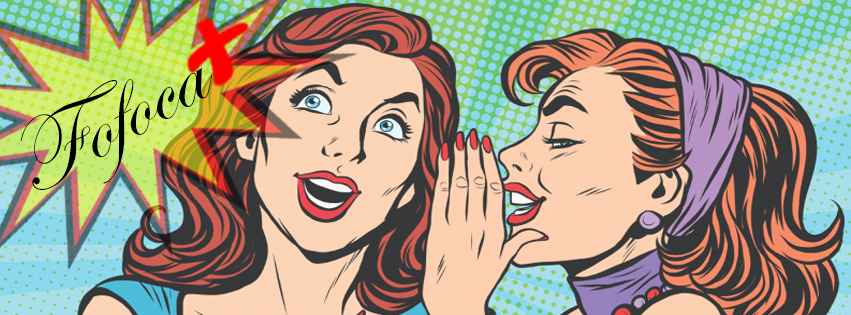
<style>
.page{position:relative;width:851px;height:315px}
.page>*{position:absolute;margin:0}
.t1{font:101px "EdwardianScriptITC";color:#000000;scale:1.04 1}
</style>
<div class="page">
<p class="t1" style="left:20px;top:67px;width:192px;height:123px;rotate:-30deg">Fofoca</p>
</div>
